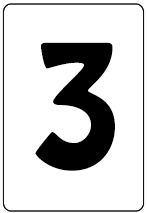
<style>
.page{position:relative;width:147px;height:213px;background:#ffffff}
.page>*{position:absolute;margin:0}
.t1{font:154.6px "HoboStd";color:#000000;scale:1.05 1}
</style>
<div class="page">
<p class="t1" style="left:35px;top:42px;width:80px;height:129px">3</p>
</div>
